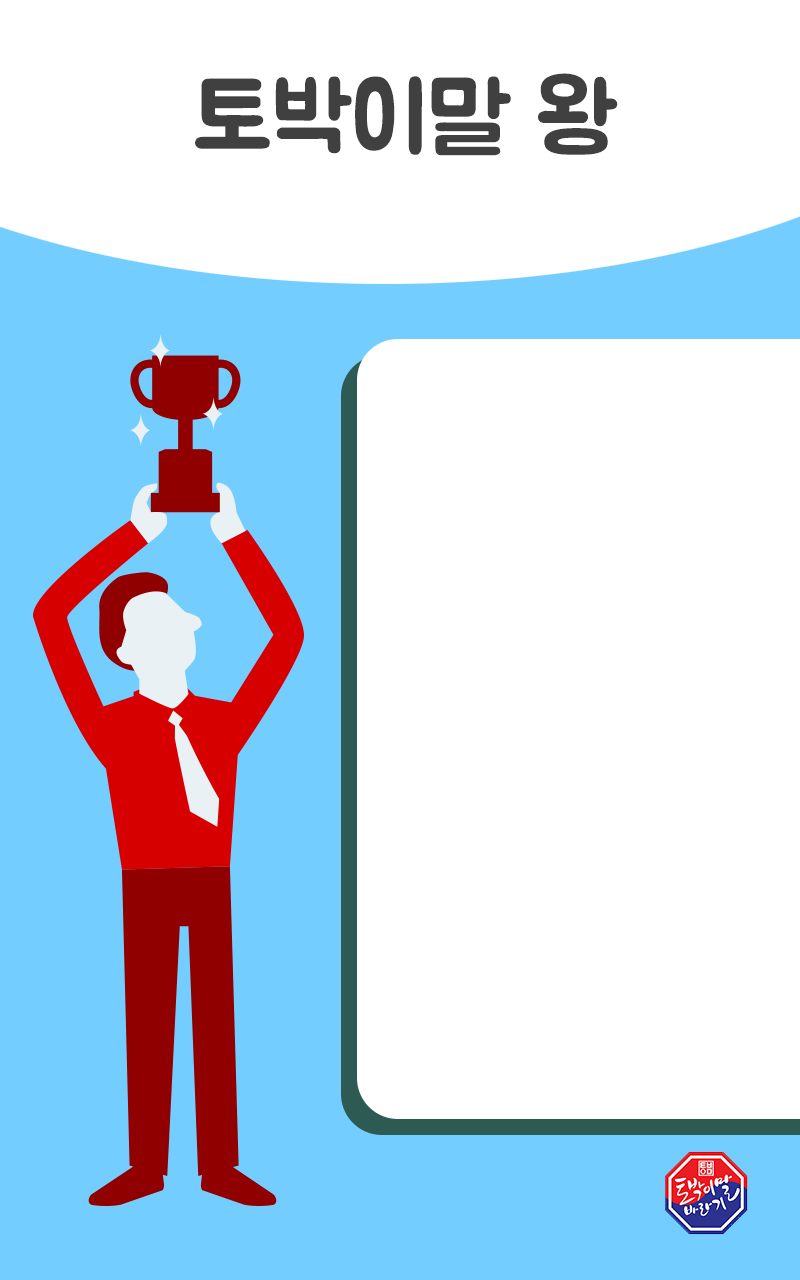
<style>
.page{position:relative;width:800px;height:1280px;background:#ffffff}
.page>*{position:absolute;margin:0}
.t1{font:96.7px "BMJUA";color:#404040}
</style>
<div class="page">
<p class="t1" style="left:195px;top:73px;width:423px;height:83px">토박이말 왕</p>
</div>
